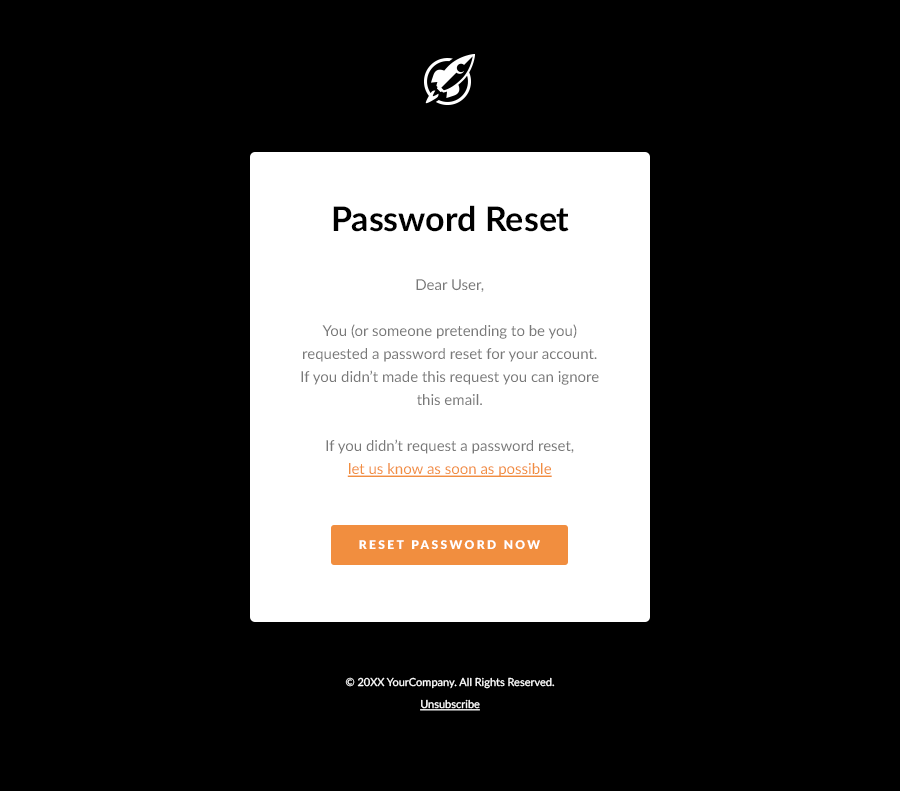
<style>
.page{position:relative;width:900px;height:791px;background:#000000}
.page>*{position:absolute;margin:0}
.t1{font:34px "Lato-Bold";color:#000000}
.t2{font:15px/23px "Lato-Regular";color:#797979}
.t3{font:15px/23px "Lato-Regular";color:#f18e3f;text-decoration:underline}
.t4{font:12px "Lato-Black";letter-spacing:0.2em;color:#ffffff;text-transform:uppercase}
.t5{font:11px/22px "Lato-Regular";color:#ffffff}
.t6{font:11px/22px "Lato-Regular";color:#ffffff;text-decoration:underline}
</style>
<div class="page">
<p class="t1" style="left:333px;top:205px;width:236px;height:27px">Password Reset</p>
<p class="t2" style="left:301px;top:279px;width:298px;height:198px;text-align:center">Dear User,<br><br>You (or someone pretending to be you) requested a password reset for your account. If you didn’t made this request you can ignore this email.<br><br>If you didn’t request a password reset, <br><span class="t3">let us know as soon as possible</span></p>
<p class="t4" style="left:359px;top:540px;width:181px;height:9px">reset password now</p>
<p class="t5" style="left:345px;top:677px;width:210px;height:34px;text-align:center">© 20XX YourCompany. All Rights Reserved.<br><span class="t6">Unsubscribe</span></p>
</div>
